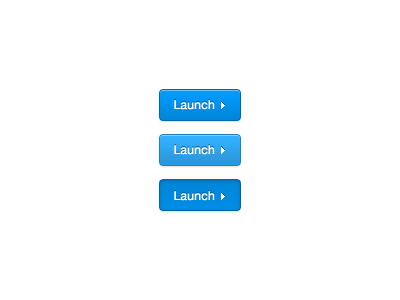
<style>
.page{position:relative;width:400px;height:300px;background:#ffffff}
.page>*{position:absolute;margin:0}
.t1{font:12px "HelveticaNeue";color:#ffffff;font-weight:bold}
</style>
<div class="page">
<p class="t1" style="left:174px;top:100px;width:41px;height:10px">Launch</p>
<p class="t1" style="left:174px;top:145px;width:41px;height:10px">Launch</p>
<p class="t1" style="left:174px;top:191px;width:41px;height:10px">Launch</p>
</div>
